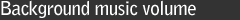
<style>
.page{position:relative;width:240px;height:20px;background:#333333}
.page>*{position:absolute;margin:0}
.t1{font:19px "BellGothicStd-Bold";letter-spacing:-0.025em;color:#ffffff}
</style>
<div class="page">
<p class="t1" style="left:1px;top:0px;width:195px;height:18px">Background music volume</p>
</div>
